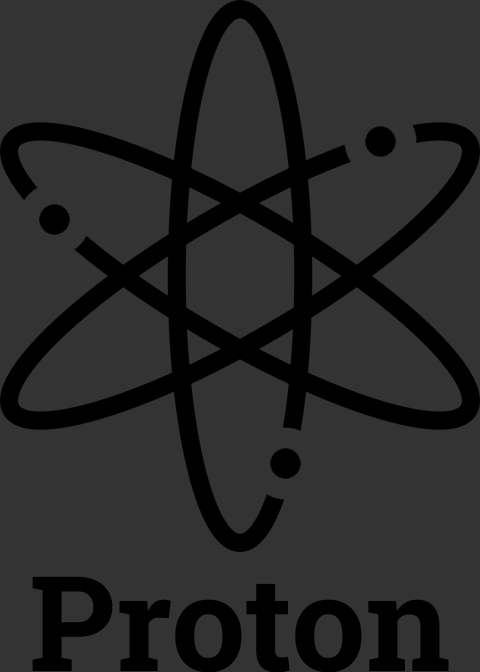
<style>
.page{position:relative;width:480px;height:672px;background:#333333}
.page>*{position:absolute;margin:0}
.t1{font:132.5px "RobotoSlab-Bold";color:#000000}
</style>
<div class="page">
<p class="t1" style="left:32px;top:576px;width:417px;height:97px">Proton</p>
</div>
